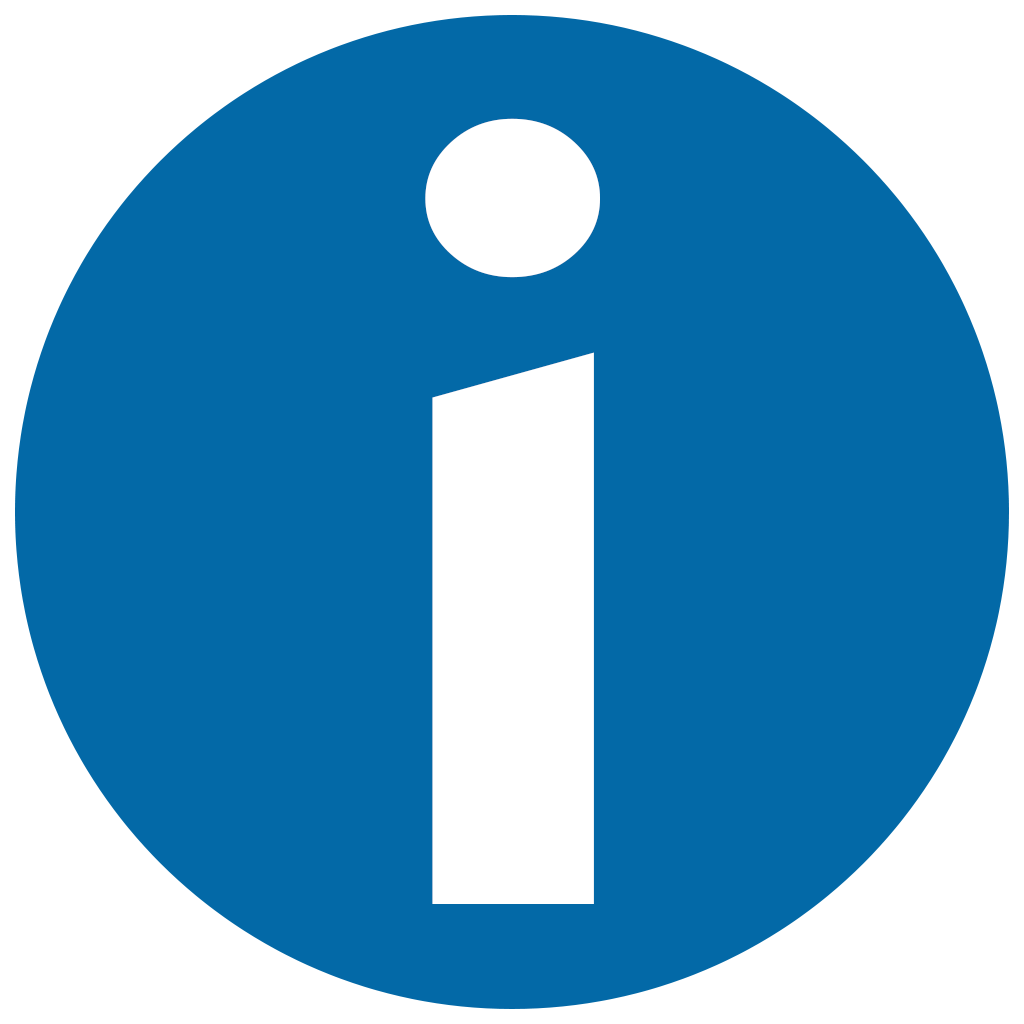
<style>
.page{position:relative;width:1024px;height:1024px;background:#0369a7}
.page>*{position:absolute;margin:0}
.t1{font:1020.9px "GurmukhiMN-Bold";color:#ffffff}
</style>
<div class="page">
<p class="t1" style="left:425px;top:118px;width:175px;height:786px">i</p>
</div>
